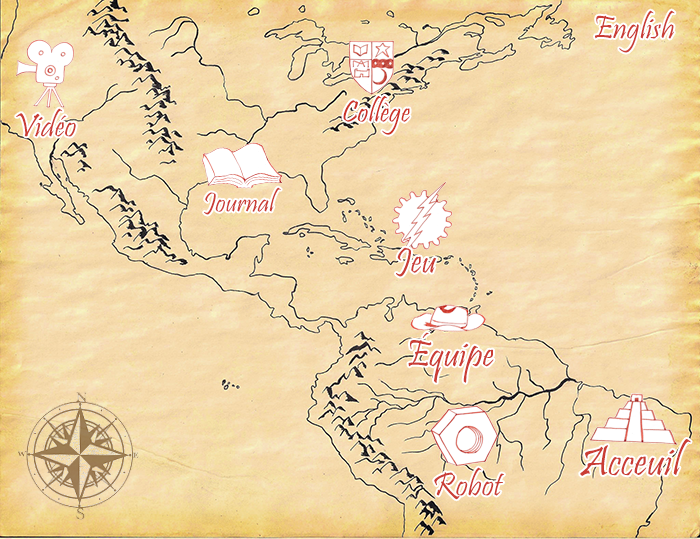
<style>
.page{position:relative;width:700px;height:539px}
.page>*{position:absolute;margin:0}
.t1{font:33.4px "Pristina-Regular";color:#ca3c34}
.t2{font:31px "Pristina-Regular";color:#cc3227}
.t3{font:28.7px "Pristina-Regular";color:#ca3c34}
.t4{font:37.3px "Pristina-Regular";color:#ca3c34}
.t5{font:38.8px "Pristina-Regular";color:#ca3c34}
.t6{font:43.5px "Pristina-Regular";color:#ca3c34}
</style>
<div class="page">
<p class="t1" style="left:595px;top:10px;width:80px;height:43px">English</p>
<p class="t2" style="left:343px;top:96px;width:67px;height:39px">Collège</p>
<p class="t1" style="left:16px;top:108px;width:60px;height:29px">Vidéo</p>
<p class="t3" style="left:204px;top:187px;width:77px;height:28px">Journal</p>
<p class="t4" style="left:396px;top:247px;width:41px;height:30px">Jeu</p>
<p class="t5" style="left:408px;top:332px;width:86px;height:51px">Équipe</p>
<p class="t6" style="left:580px;top:439px;width:111px;height:37px">Acceuil</p>
<p class="t1" style="left:434px;top:467px;width:70px;height:33px">Robot</p>
</div>
